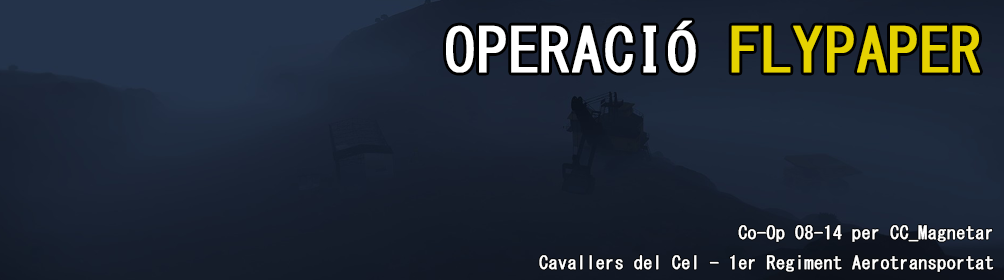
<style>
.page{position:relative;width:1004px;height:280px}
.page>*{position:absolute;margin:0}
.t1{font:60px "MS-Gothic";color:#ffffff;font-weight:bold}
.t2{font:60px "MS-Gothic";color:#e5d200;font-weight:bold}
.t3{font:18px/30px "MS-Gothic";color:#ffffff;font-weight:bold}
</style>
<div class="page">
<p class="t1" style="left:446px;top:20px;width:534px;height:53px">OPERACIÓ <span class="t2">FLYPAPER</span></p>
<p class="t3" style="left:539px;top:225px;width:455px;height:47px;text-align:right">Co-Op 08-14 per CC_Magnetar<br>Cavallers del Cel - 1er Regiment Aerotransportat</p>
</div>
